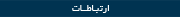
<style>
.page{position:relative;width:180px;height:17px;background:#003351}
.page>*{position:absolute;margin:0}
.t1{font:10px "BYekan";color:#ffffff}
</style>
<div class="page">
<p class="t1" style="left:72px;top:5px;width:37px;height:8px">ارتبـاطــات</p>
</div>
